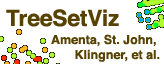
<style>
.page{position:relative;width:164px;height:64px;background:#ffffff}
.page>*{position:absolute;margin:0}
.t1{font:22.5px "Helvetica-Bold";color:#574201}
.t2{font:12.5px "Helvetica-Bold";color:#574201}
</style>
<div class="page">
<p class="t1" style="left:6px;top:9px;width:113px;height:18px">TreeSetViz</p>
<p class="t2" style="left:51px;top:34px;width:109px;height:28px;text-align:right">Amenta, St. John, <br>Klingner, et al.</p>
</div>
